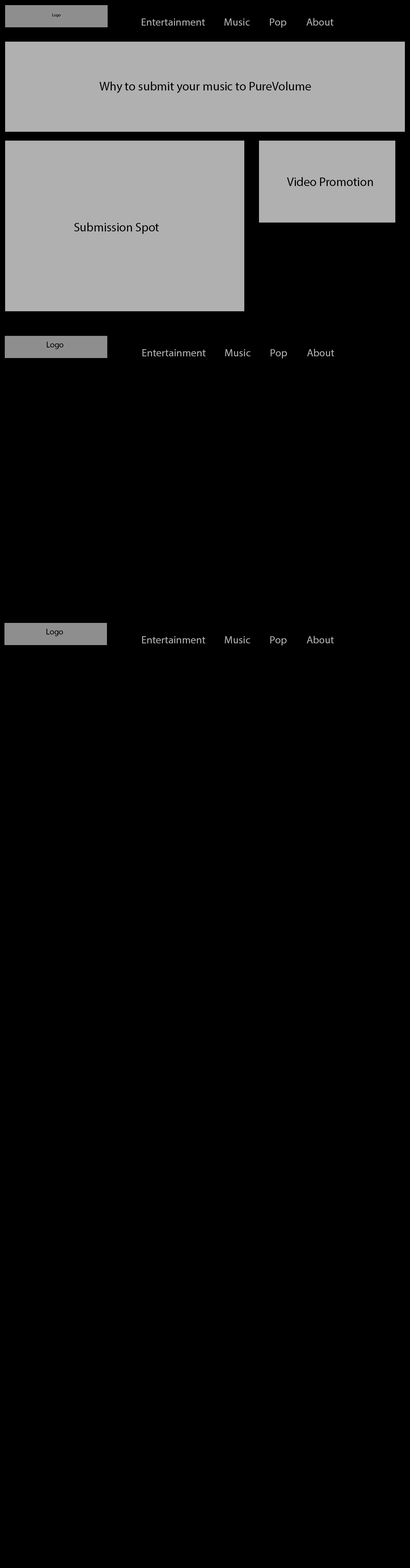
<style>
.page{position:relative;width:410px;height:1568px;background:#000000}
.page>*{position:absolute;margin:0}
.t1{font:4.1px "MyriadPro-Regular";color:#000000}
.t2{font:10.6px "MyriadPro-Regular";color:#b0b0b0}
.t3{font:12.3px "MyriadPro-Regular";color:#000000}
.t4{font:8.2px "MyriadPro-Regular";color:#000000}
</style>
<div class="page">
<p class="t1" style="left:52px;top:13px;width:9px;height:4px">Logo</p>
<p class="t2" style="left:142px;top:18px;width:63px;height:8px">Entertainment</p>
<p class="t2" style="left:224px;top:18px;width:26px;height:8px">Music</p>
<p class="t2" style="left:270px;top:18px;width:16px;height:10px">Pop</p>
<p class="t2" style="left:306px;top:18px;width:27px;height:8px">About</p>
<p class="t3" style="left:99px;top:82px;width:212px;height:11px">Why to submit your music to PureVolume</p>
<p class="t3" style="left:287px;top:177px;width:86px;height:9px">Video Promotion</p>
<p class="t3" style="left:74px;top:223px;width:85px;height:11px">Submission Spot</p>
<p class="t4" style="left:47px;top:342px;width:16px;height:7px">Logo</p>
<p class="t2" style="left:142px;top:349px;width:63px;height:7px">Entertainment</p>
<p class="t2" style="left:225px;top:349px;width:25px;height:7px">Music</p>
<p class="t2" style="left:270px;top:349px;width:17px;height:9px">Pop</p>
<p class="t2" style="left:307px;top:349px;width:27px;height:7px">About</p>
<p class="t4" style="left:46px;top:629px;width:17px;height:7px">Logo</p>
<p class="t2" style="left:142px;top:636px;width:63px;height:7px">Entertainment</p>
<p class="t2" style="left:225px;top:636px;width:25px;height:7px">Music</p>
<p class="t2" style="left:270px;top:636px;width:16px;height:9px">Pop</p>
<p class="t2" style="left:307px;top:636px;width:26px;height:7px">About</p>
</div>
